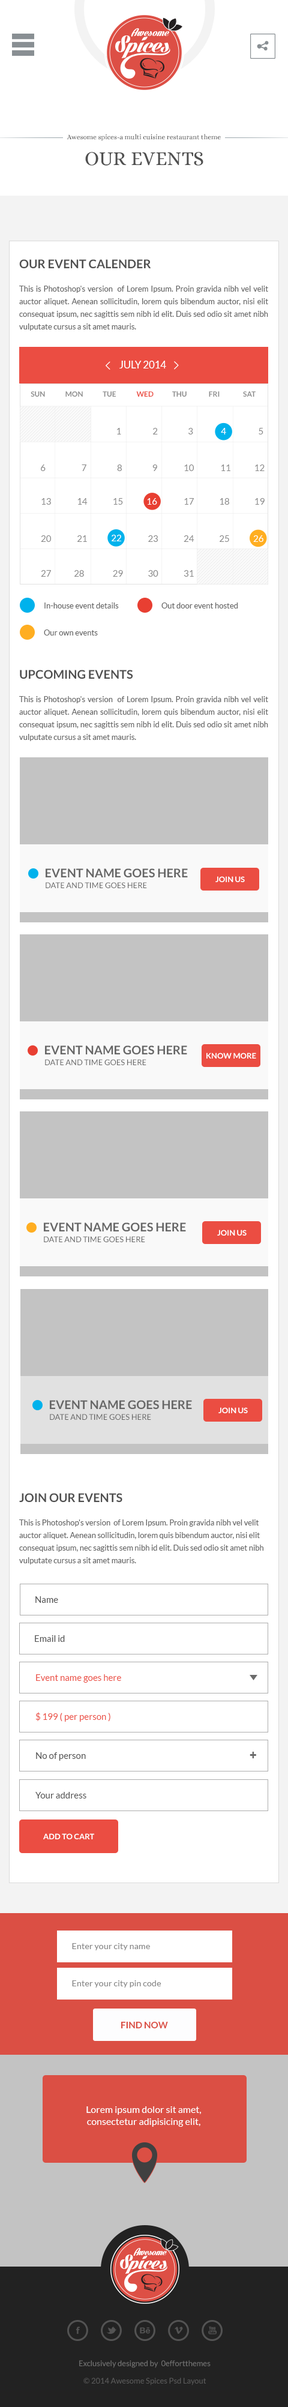
<style>
.page{position:relative;width:288px;height:2407px;background:#ffffff}
.page>*{position:absolute;margin:0}
.t1{font:6.8px "Alice-Regular";color:#505050}
.t2{font:20px "Alice-Regular";color:#505050;text-transform:uppercase}
.t3{font:12px "Lato-Bold";color:#505050;text-transform:uppercase}
.t4{font:7.8px/12.6px "Lato-Regular";color:#666666}
.t5{font:10px "Lato-Regular";color:#ffffff;text-transform:uppercase}
.t6{font:7.2px "Lato-Bold";color:#8e8e8e}
.t7{font:7.2px "Lato-Bold";color:#eb4d42}
.t8{font:9px "Lato-Regular";color:#898989}
.t9{font:9px "Lato-Regular";color:#ffffff}
.t10{font:9.3px "Lato-Regular";color:#ffffff}
.t11{font:9.3px "Lato-Regular";color:#898989}
.t12{font:7.8px "Lato-Regular";color:#666666}
.t13{font:12px "Lato-Bold";color:#666666;text-transform:uppercase}
.t14{font:7.8px "Lato-Bold";color:#ffffff;text-transform:uppercase}
.t15{font:7.8px "Lato-Regular";color:#666666;text-transform:uppercase}
.t16{font:9px "Lato-Regular";color:#505050}
.t17{font:9px "Lato-Regular";color:#eb4d42}
.t18{font:12px "Arial-BoldMT";color:#6b6b6b}
.t19{font:8.6px "Lato-Regular";color:#888888}
.t20{font:9.1px "Lato-Bold";color:#db4f44;text-transform:uppercase}
.t21{font:9.6px/12px "Lato-Regular";color:#ffffff}
.t22{font:7.8px "Lato-Regular";color:#737373}
.t23{font:7.8px "Lato-Regular";color:#5a5a5a}
</style>
<div class="page">
<p class="t1" style="left:67px;top:134px;width:154px;height:7px">Awesome spices-a multi cuisine restaurant theme</p>
<p class="t2" style="left:85px;top:152px;width:118px;height:14px">Our events</p>
<p class="t3" style="left:19px;top:259px;width:132px;height:9px">Our event calender</p>
<p class="t4" style="left:19px;top:286px;width:249px;height:45px;text-align:justify">This is Photoshop's version  of Lorem Ipsum. Proin gravida nibh vel velit auctor aliquet. Aenean sollicitudin, lorem quis bibendum auctor, nisi elit consequat ipsum, nec sagittis sem nibh id elit. Duis sed odio sit amet nibh vulputate cursus a sit amet mauris.</p>
<p class="t5" style="left:119px;top:361px;width:47px;height:7px">july 2014</p>
<p class="t6" style="left:31px;top:391px;width:14px;height:6px">SUN</p>
<p class="t6" style="left:65px;top:391px;width:18px;height:6px">MON</p>
<p class="t6" style="left:103px;top:391px;width:13px;height:6px">TUE</p>
<p class="t7" style="left:136px;top:391px;width:18px;height:6px">WED</p>
<p class="t6" style="left:172px;top:391px;width:15px;height:6px">THU</p>
<p class="t6" style="left:209px;top:391px;width:11px;height:6px">FRI</p>
<p class="t6" style="left:243px;top:391px;width:13px;height:6px">SAT</p>
<p class="t8" style="left:117px;top:428px;width:4px;height:6px">1</p>
<p class="t8" style="left:153px;top:428px;width:5px;height:6px">2</p>
<p class="t8" style="left:188px;top:428px;width:5px;height:6px">3</p>
<p class="t9" style="left:221px;top:428px;width:5px;height:6px">4</p>
<p class="t8" style="left:259px;top:428px;width:4px;height:6px">5</p>
<p class="t8" style="left:41px;top:464px;width:5px;height:7px">6</p>
<p class="t8" style="left:82px;top:464px;width:4px;height:7px">7</p>
<p class="t8" style="left:117px;top:464px;width:5px;height:7px">8</p>
<p class="t8" style="left:152px;top:464px;width:5px;height:7px">9</p>
<p class="t8" style="left:184px;top:464px;width:10px;height:7px">10</p>
<p class="t8" style="left:221px;top:464px;width:9px;height:7px">11</p>
<p class="t8" style="left:255px;top:464px;width:10px;height:7px">12</p>
<p class="t8" style="left:41px;top:498px;width:10px;height:7px">13</p>
<p class="t8" style="left:77px;top:498px;width:11px;height:7px">14</p>
<p class="t8" style="left:113px;top:498px;width:10px;height:7px">15</p>
<p class="t10" style="left:147px;top:498px;width:10px;height:7px">16</p>
<p class="t8" style="left:184px;top:498px;width:10px;height:7px">17</p>
<p class="t8" style="left:220px;top:498px;width:9px;height:7px">18</p>
<p class="t11" style="left:255px;top:498px;width:10px;height:7px">19</p>
<p class="t8" style="left:41px;top:535px;width:11px;height:7px">20</p>
<p class="t8" style="left:77px;top:535px;width:10px;height:7px">21</p>
<p class="t9" style="left:112px;top:535px;width:10px;height:6px">22</p>
<p class="t8" style="left:148px;top:535px;width:10px;height:7px">23</p>
<p class="t8" style="left:184px;top:535px;width:10px;height:7px">24</p>
<p class="t8" style="left:220px;top:535px;width:9px;height:7px">25</p>
<p class="t9" style="left:253px;top:535px;width:10px;height:7px">26</p>
<p class="t8" style="left:41px;top:570px;width:10px;height:7px">27</p>
<p class="t8" style="left:74px;top:570px;width:10px;height:7px">28</p>
<p class="t8" style="left:113px;top:570px;width:10px;height:7px">29</p>
<p class="t8" style="left:148px;top:570px;width:10px;height:7px">30</p>
<p class="t8" style="left:184px;top:570px;width:10px;height:7px">31</p>
<p class="t12" style="left:44px;top:602px;width:75px;height:6px">In-house event details</p>
<p class="t12" style="left:161px;top:602px;width:77px;height:6px">Out door event hosted</p>
<p class="t12" style="left:44px;top:629px;width:54px;height:6px">Our own events</p>
<p class="t3" style="left:20px;top:670px;width:113px;height:9px">Upcoming events</p>
<p class="t4" style="left:19px;top:696px;width:249px;height:45px;text-align:justify">This is Photoshop's version  of Lorem Ipsum. Proin gravida nibh vel velit auctor aliquet. Aenean sollicitudin, lorem quis bibendum auctor, nisi elit consequat ipsum, nec sagittis sem nibh id elit. Duis sed odio sit amet nibh vulputate cursus a sit amet mauris.</p>
<p class="t13" style="left:46px;top:868px;width:142px;height:9px">Event Name goes here</p>
<p class="t14" style="left:215px;top:876px;width:30px;height:6px">join us</p>
<p class="t15" style="left:46px;top:882px;width:101px;height:6px">date and time goes here</p>
<p class="t13" style="left:45px;top:1045px;width:142px;height:9px">Event Name goes here</p>
<p class="t15" style="left:45px;top:1059px;width:101px;height:6px">date and time goes here</p>
<p class="t14" style="left:206px;top:1052px;width:50px;height:6px">know more</p>
<p class="t13" style="left:44px;top:1222px;width:142px;height:9px">Event Name goes here</p>
<p class="t14" style="left:217px;top:1229px;width:30px;height:6px">join us</p>
<p class="t15" style="left:44px;top:1236px;width:101px;height:6px">date and time goes here</p>
<p class="t13" style="left:50px;top:1400px;width:142px;height:9px">Event Name goes here</p>
<p class="t14" style="left:218px;top:1407px;width:30px;height:6px">join us</p>
<p class="t15" style="left:50px;top:1414px;width:101px;height:6px">date and time goes here</p>
<p class="t3" style="left:19px;top:1493px;width:103px;height:9px">join our events</p>
<p class="t4" style="left:19px;top:1519px;width:244px;height:45px">This is Photoshop's version  of Lorem Ipsum. Proin gravida nibh vel velit auctor aliquet. Aenean sollicitudin, lorem quis bibendum auctor, nisi elit consequat ipsum, nec sagittis sem nibh id elit. Duis sed odio sit amet nibh vulputate cursus a sit amet mauris.</p>
<p class="t16" style="left:35px;top:1596px;width:23px;height:7px">Name</p>
<p class="t16" style="left:35px;top:1635px;width:30px;height:7px">Email id</p>
<p class="t17" style="left:36px;top:1674px;width:85px;height:8px">Event name goes here</p>
<p class="t17" style="left:35px;top:1712px;width:75px;height:9px">$ 199 ( per person )</p>
<p class="t16" style="left:36px;top:1752px;width:50px;height:8px">No of person</p>
<p class="t18" style="left:250px;top:1751px;width:6px;height:7px">+</p>
<p class="t16" style="left:35px;top:1792px;width:51px;height:6px">Your address</p>
<p class="t14" style="left:43px;top:1833px;width:51px;height:6px">add to cart</p>
<p class="t19" style="left:72px;top:1943px;width:78px;height:7px">Enter your city name</p>
<p class="t19" style="left:72px;top:1980px;width:89px;height:7px">Enter your city pin code</p>
<p class="t20" style="left:121px;top:2021px;width:47px;height:7px">find Now</p>
<p class="t21" style="left:86px;top:2106px;width:115px;height:20px;text-align:center">Lorem ipsum dolor sit amet, consectetur adipisicing elit,</p>
<p class="t22" style="left:79px;top:2360px;width:132px;height:8px">Exclusively designed by  0effortthemes</p>
<p class="t23" style="left:83px;top:2377px;width:123px;height:8px">© 2014 Awesome Spices Psd Layout</p>
</div>
